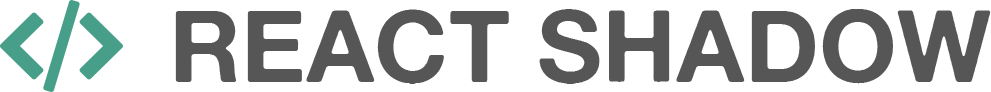
<style>
.page{position:relative;width:991px;height:92px;background:#ffffff}
.page>*{position:absolute;margin:0}
.t1{font:100px "AlteHaasGrotesk_Bold";color:#565656}
</style>
<div class="page">
<p class="t1" style="left:175px;top:9px;width:816px;height:75px">REACT SHADOW</p>
</div>
